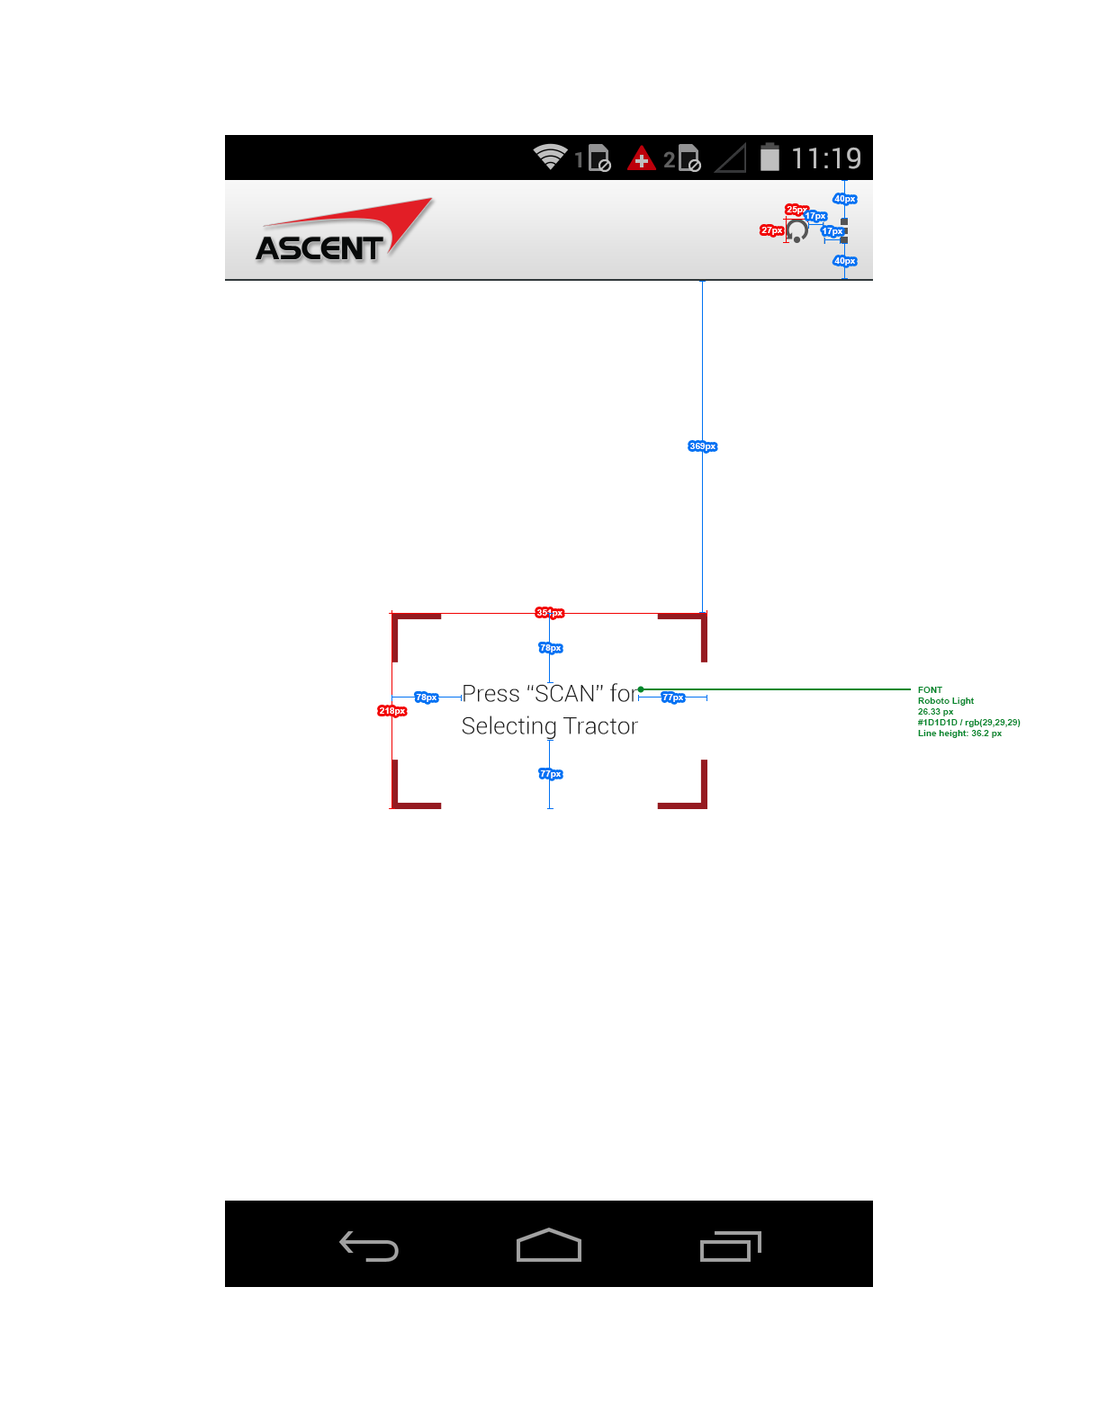
<style>
.page{position:relative;width:1098px;height:1422px;background:#ffffff}
.page>*{position:absolute;margin:0}
.t1{font:9px "Arial-BoldMT";color:#ffffff}
.t2{font:23.7px/32.6px "Roboto-Light";color:#1d1d1d}
.t3{font:9px "Arial-BoldMT";color:#00872b}
</style>
<div class="page">
<p class="t1" style="left:834px;top:195px;width:21px;height:8px">40px</p>
<p class="t1" style="left:787px;top:206px;width:20px;height:8px">25px</p>
<p class="t1" style="left:806px;top:212px;width:19px;height:8px">17px</p>
<p class="t1" style="left:761px;top:227px;width:21px;height:8px">27px</p>
<p class="t1" style="left:823px;top:228px;width:19px;height:8px">17px</p>
<p class="t1" style="left:834px;top:257px;width:21px;height:9px">40px</p>
<p class="t1" style="left:690px;top:443px;width:26px;height:8px">369px</p>
<p class="t1" style="left:537px;top:609px;width:25px;height:8px">351px</p>
<p class="t1" style="left:540px;top:644px;width:21px;height:8px">78px</p>
<p class="t2" style="left:462px;top:683px;width:176px;height:57px;text-align:center">Press “SCAN” for<br>Selecting Tractor</p>
<p class="t3" style="left:918px;top:687px;width:103px;height:51px">FONT <br>Roboto Light<br>26.33 px<br>#1D1D1D / rgb(29,29,29)<br>Line height: 36.2 px</p>
<p class="t1" style="left:416px;top:694px;width:20px;height:8px">78px</p>
<p class="t1" style="left:662px;top:694px;width:21px;height:8px">77px</p>
<p class="t1" style="left:380px;top:707px;width:25px;height:9px">218px</p>
<p class="t1" style="left:540px;top:770px;width:21px;height:8px">77px</p>
</div>
